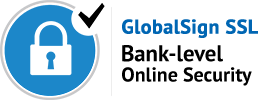
<style>
.page{position:relative;width:262px;height:100px;background:#ffffff}
.page>*{position:absolute;margin:0}
.t1{font:20.1px "PTSans-Bold";color:#0066b3;font-weight:bold}
.t2{font:22.7px "PTSans-Bold";color:#000000}
.t3{font:20.1px "PTSans-Bold";color:#000000}
</style>
<div class="page">
<p class="t1" style="left:122px;top:19px;width:136px;height:19px">GlobalSign SSL</p>
<p class="t2" style="left:122px;top:45px;width:101px;height:17px">Bank-level</p>
<p class="t3" style="left:122px;top:67px;width:130px;height:19px">Online Security</p>
</div>
